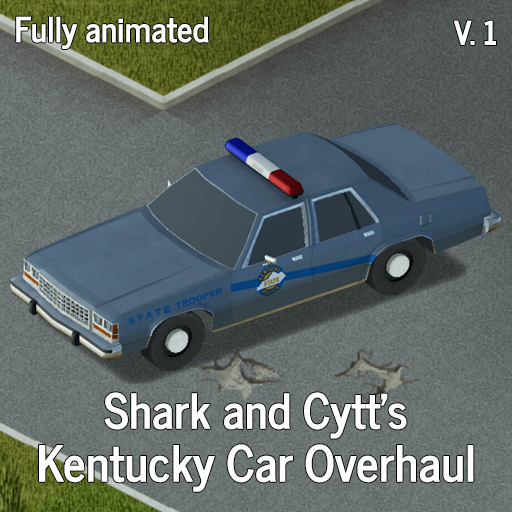
<style>
.page{position:relative;width:512px;height:512px}
.page>*{position:absolute;margin:0}
.t1{font:34.1px "NewsCycle-Bold";color:#ffffff}
.t2{font:32.3px "NewsCycle-Bold";color:#ffffff}
.t3{font:47.9px "NewsCycle-Bold";color:#ffffff}
.t4{font:49.3px "NewsCycle-Bold";color:#ffffff}
</style>
<div class="page">
<p class="t1" style="left:16px;top:16px;width:193px;height:33px">Fully animated</p>
<p class="t2" style="left:454px;top:20px;width:42px;height:25px">V. 1</p>
<p class="t3" style="left:104px;top:392px;width:303px;height:47px">Shark and Cytt’s</p>
<p class="t4" style="left:39px;top:444px;width:435px;height:48px">Kentucky Car Overhaul</p>
</div>
